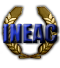
<style>
.page{position:relative;width:60px;height:68px;background:#ffffff}
.page>*{position:absolute;margin:0}
.t1{font:24px "Impact"}
</style>
<div class="page">
<p class="t1" style="left:3px;top:24px;width:54px;height:19px">INEAC</p>
</div>
